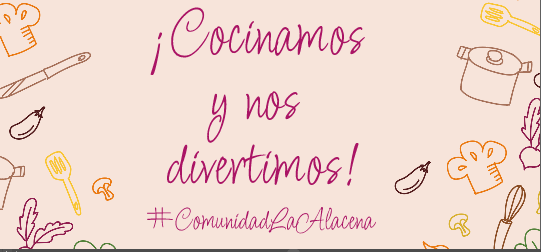
<style>
.page{position:relative;width:541px;height:252px;background:#f7e4da}
.page>*{position:absolute;margin:0}
.t1{font:65px "Licorice-Regular";color:#aa1465}
.t2{font:30px "Licorice-Regular";color:#aa1465}
</style>
<div class="page">
<p class="t1" style="left:150px;top:7px;width:215px;height:179px;text-align:center">¡Cocinamos <br>y nos <br>divertimos!</p>
<p class="t2" style="left:147px;top:207px;width:230px;height:27px">#ComunidadLaAlacena</p>
</div>
